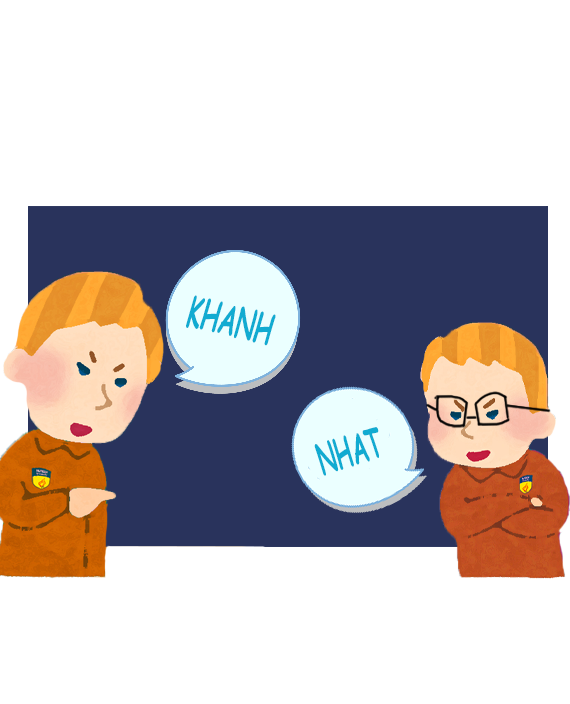
<style>
.page{position:relative;width:570px;height:704px;background:#ffffff}
.page>*{position:absolute;margin:0}
.t1{font:41.6px "ComicSansMS-Bold";color:#11abd1;scale:0.57 1}
.t2{font:41.5px "ComicSansMS-Bold";color:#11abd1;scale:0.54 1}
</style>
<div class="page">
<p class="t1" style="left:186px;top:295px;width:90px;height:51px;rotate:14deg">KHANH</p>
<p class="t2" style="left:314px;top:427px;width:65px;height:49px;rotate:-17deg">NHAT</p>
</div>
